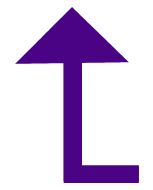
<style>
.page{position:relative;width:153px;height:190px;background:#ffffff}
.page>*{position:absolute;margin:0}
.t1{font:204px "RobotoCondensed-Regular";color:#4a0385}
</style>
<div class="page">
<p class="t1" style="left:63px;top:37px;width:76px;height:146px">L</p>
<p class="t1" style="left:63px;top:35px;width:76px;height:146px">L</p>
</div>
